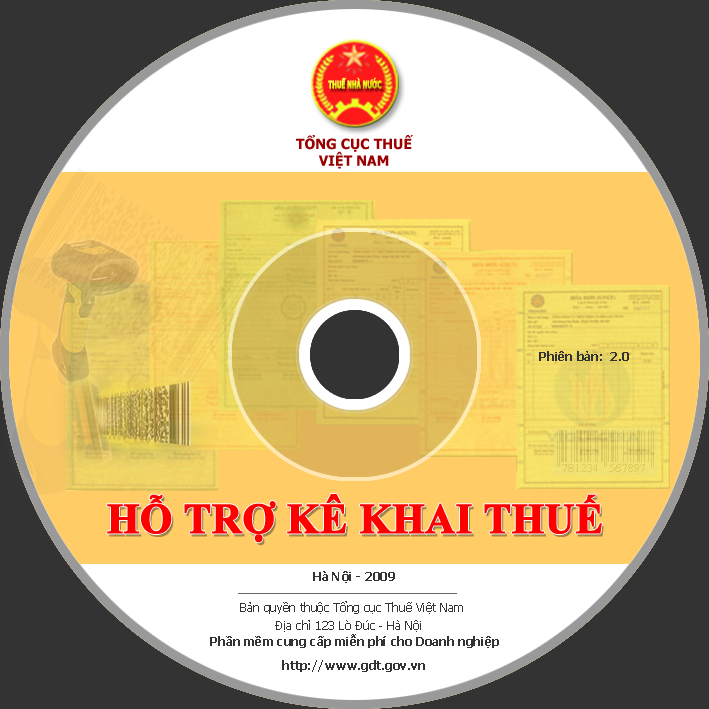
<style>
.page{position:relative;width:709px;height:709px;background:#ffffff}
.page>*{position:absolute;margin:0}
.t1{font:10.2px "Tahoma-Bold";font-weight:bold;scale:0.58 1}
.t2{font:14px "Tahoma-Bold";color:#990000}
.t3{font:12px "Tahoma-Bold";color:#333333}
.t4{font:42px "TimesNewRomanPS-BoldMT";color:#ff0000;font-weight:bold}
.t5{font:12px "Tahoma";color:#333333}
</style>
<div class="page">
<p class="t1" style="left:328px;top:77px;width:54px;height:12px">THUẾ NHÀ NƯỚC</p>
<p class="t2" style="left:296px;top:135px;width:117px;height:34px;text-align:center">TỔNG CỤC THUẾ<br>VIỆT NAM</p>
<p class="t3" style="left:539px;top:351px;width:90px;height:10px">Phiên bản:  2.0</p>
<p class="t4" style="left:107px;top:494px;width:495px;height:49px">HỖ TRỢ KÊ KHAI THUẾ</p>
<p class="t4" style="left:108px;top:495px;width:495px;height:49px">HỖ TRỢ KÊ KHAI THUẾ</p>
<p class="t3" style="left:313px;top:571px;width:82px;height:12px">Hà Nội - 2009</p>
<p class="t5" style="left:240px;top:601px;width:223px;height:13px">Bản quyền thuộc Tổng cục Thuế Việt Nam</p>
<p class="t5" style="left:275px;top:620px;width:146px;height:12px">Địa chỉ 123 Lò Đúc - Hà Nội</p>
<p class="t3" style="left:210px;top:634px;width:289px;height:14px">Phần mềm cung cấp miễn phí cho Doanh nghiệp</p>
<p class="t3" style="left:282px;top:660px;width:143px;height:12px">http://www.gdt.gov.vn</p>
</div>
